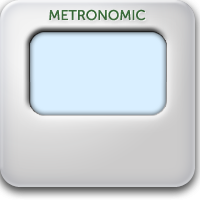
<style>
.page{position:relative;width:200px;height:200px;background:#d9efff}
.page>*{position:absolute;margin:0}
.t1{font:14px "MuseoSans-500";color:#336633;text-transform:uppercase}
</style>
<div class="page">
<p class="t1" style="left:49px;top:9px;width:97px;height:12px">Metronomic</p>
</div>
